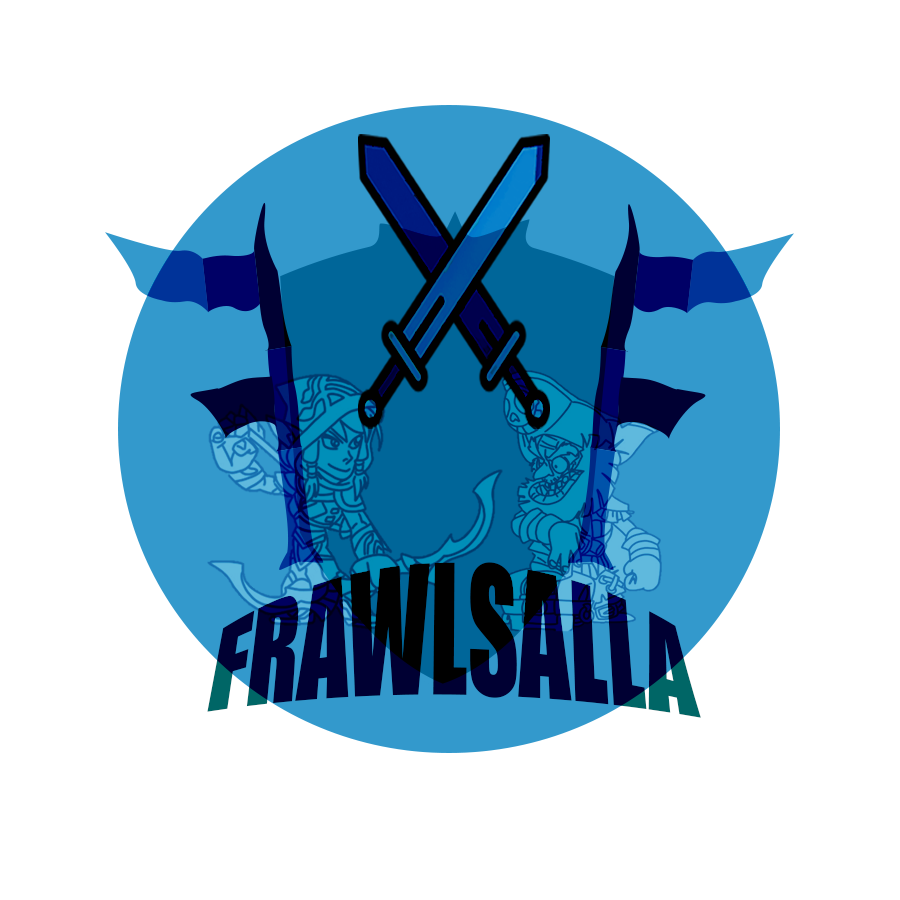
<style>
.page{position:relative;width:900px;height:900px;background:#ffffff}
.page>*{position:absolute;margin:0}
.t1{font:105.2px "Impact";scale:0.94 1}
</style>
<div class="page">
<p class="t1" style="left:207px;top:562px;width:494px;height:156px;rotate:1deg">FRAWLSALLA</p>
</div>
